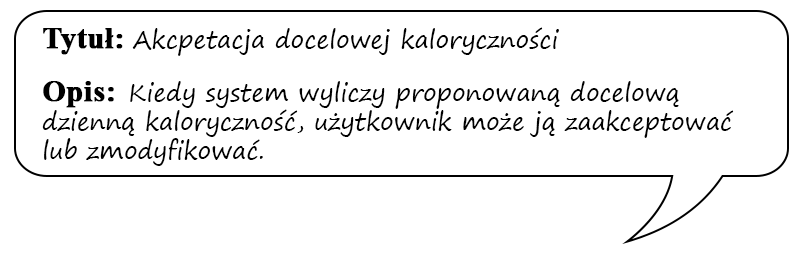
<style>
.page{position:relative;width:800px;height:256px;background:#ffffff}
.page>*{position:absolute;margin:0}
.t1{font:24px "SegoePrint";color:#000000}
.t2{font:30px "TimesNewRomanPS-BoldMT";color:#000000;font-weight:bold}
</style>
<div class="page">
<p class="t1" style="left:42px;top:27px;width:692px;height:139px"><span class="t2">Tytuł: </span>Akcpetacja docelowej kaloryczności<br><br><span class="t2">Opis:  </span>Kiedy system wyliczy proponowaną docelową dzienną kaloryczność, użytkownik może ją zaakceptować lub zmodyfikować.</p>
</div>
